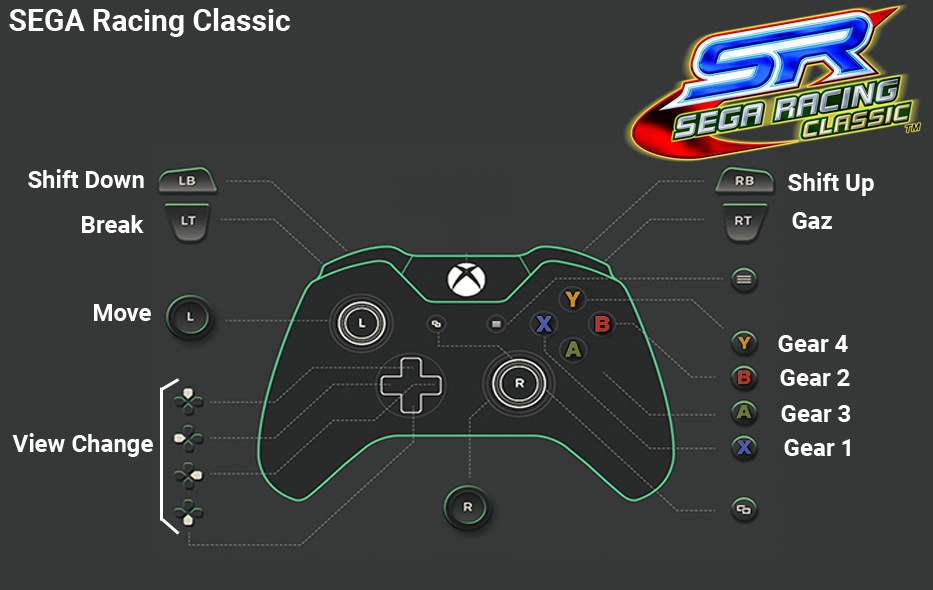
<style>
.page{position:relative;width:933px;height:590px;background:#363838}
.page>*{position:absolute;margin:0}
.t1{font:30px "Roboto-Bold";color:#ffffff}
.t2{font:24px "Roboto-Bold";color:#ffffff}
</style>
<div class="page">
<p class="t1" style="left:9px;top:8px;width:281px;height:29px">SEGA Racing Classic</p>
<p class="t2" style="left:28px;top:169px;width:116px;height:19px">Shift Down</p>
<p class="t2" style="left:788px;top:172px;width:86px;height:24px">Shift Up</p>
<p class="t2" style="left:82px;top:215px;width:62px;height:18px">Break</p>
<p class="t2" style="left:792px;top:212px;width:40px;height:17px">Gaz</p>
<p class="t2" style="left:94px;top:304px;width:57px;height:17px">Move</p>
<p class="t2" style="left:778px;top:335px;width:70px;height:17px">Gear 4</p>
<p class="t2" style="left:780px;top:369px;width:70px;height:17px">Gear 2</p>
<p class="t2" style="left:781px;top:405px;width:70px;height:17px">Gear 3</p>
<p class="t2" style="left:12px;top:433px;width:141px;height:24px">View Change</p>
<p class="t2" style="left:784px;top:439px;width:66px;height:17px">Gear 1</p>
</div>
